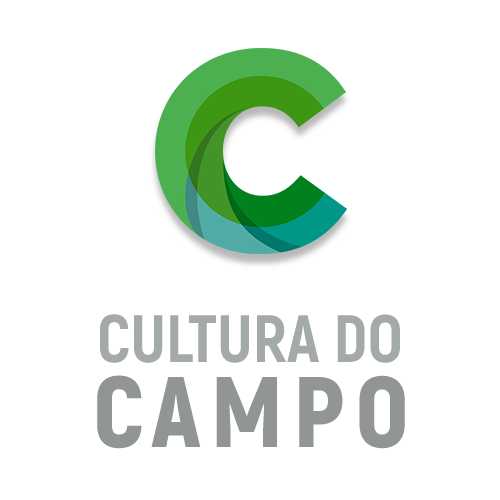
<style>
.page{position:relative;width:500px;height:500px;background:#ffffff}
.page>*{position:absolute;margin:0}
.t1{font:66.7px "Akrobat-ExtraBold";color:#a4a9aa;text-transform:uppercase}
.t2{font:100px "Akrobat-Black";letter-spacing:0.098em;color:#919596;text-transform:uppercase}
</style>
<div class="page">
<p class="t1" style="left:100px;top:314px;width:300px;height:49px">cultura do</p>
<p class="t2" style="left:97px;top:375px;width:308px;height:74px">campo</p>
</div>
